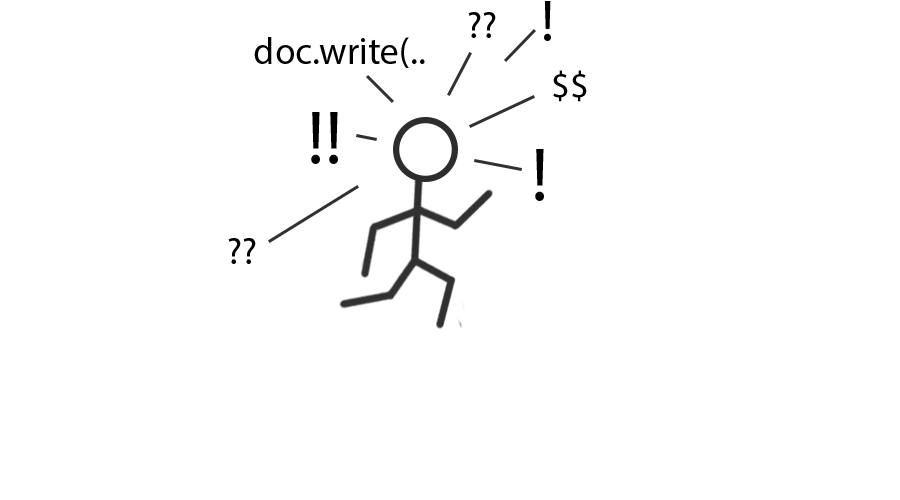
<style>
.page{position:relative;width:900px;height:500px;background:#ffffff}
.page>*{position:absolute;margin:0}
.t1{font:58.3px "MyriadPro-Regular";color:#000000}
.t2{font:37.5px "MyriadPro-Regular";color:#000000}
.t3{font:75px "MyriadPro-Regular";color:#000000}
</style>
<div class="page">
<p class="t1" style="left:544px;top:1px;width:7px;height:40px">!</p>
<p class="t2" style="left:468px;top:12px;width:28px;height:26px">??</p>
<p class="t2" style="left:254px;top:37px;width:171px;height:31px">doc.write(..</p>
<p class="t2" style="left:553px;top:70px;width:34px;height:32px">$$</p>
<p class="t3" style="left:311px;top:112px;width:27px;height:52px">!!</p>
<p class="t3" style="left:535px;top:149px;width:9px;height:52px">!</p>
<p class="t2" style="left:228px;top:238px;width:28px;height:26px">??</p>
</div>
